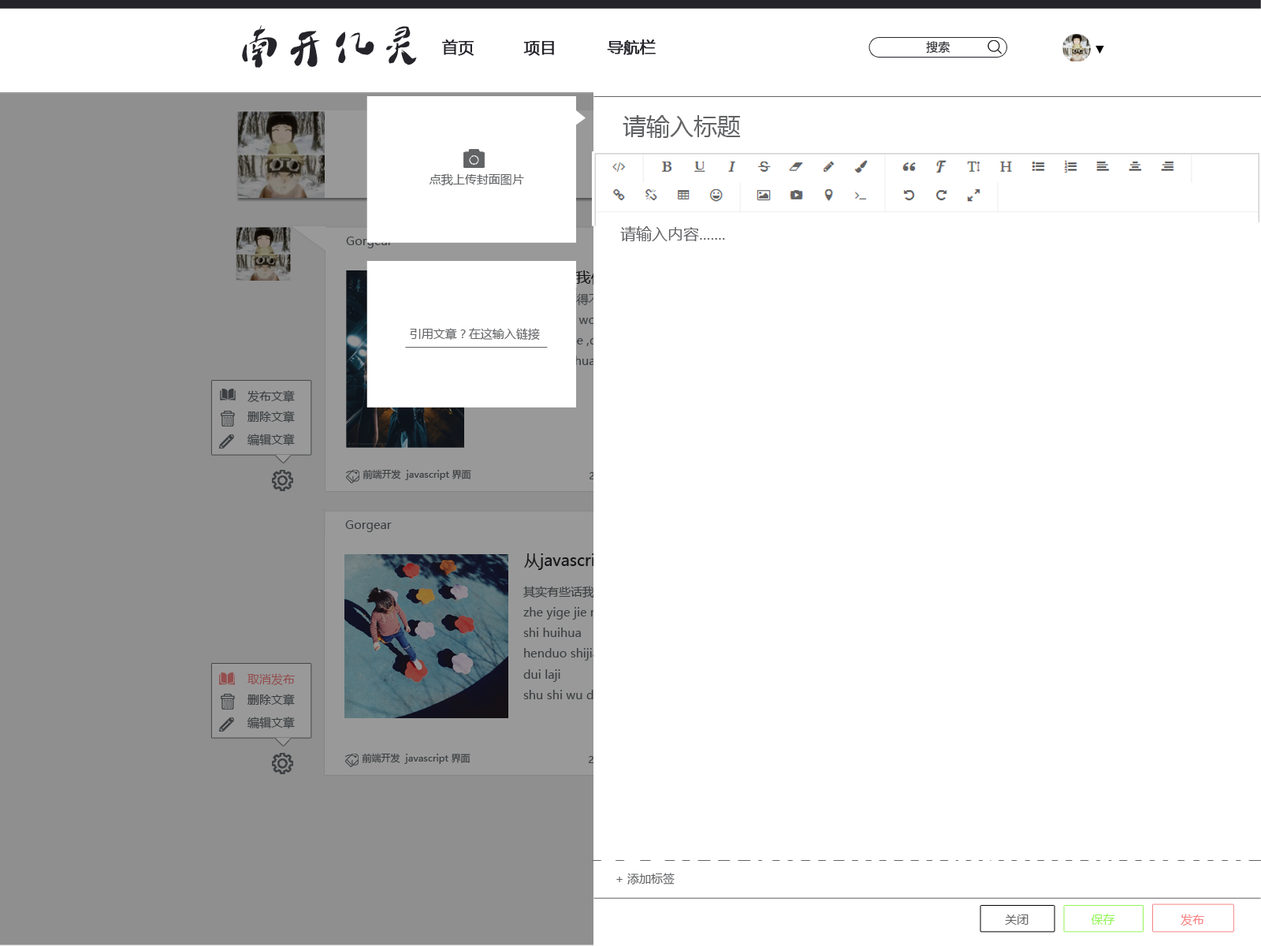
<style>
.page{position:relative;width:1261px;height:946px;background:#ffffff}
.page>*{position:absolute;margin:0}
.t1{font:47.3px "DLTZkDLF";color:#24242a}
.t2{font:15.8px "MicrosoftYaHei";color:#24242a;font-weight:bold}
.t3{font:11.8px "MicrosoftYaHei";color:#24242a}
.t4{font:11.8px "MicrosoftYaHei";color:#000000}
.t5{font:23.6px "MicrosoftYaHei";color:#626365}
.t6{font:11.8px "MicrosoftYaHei";color:#626365}
.t7{font:15.8px "MicrosoftYaHei";color:#626365}
.t8{font:11.8px "MicrosoftYaHei";color:#3b3f41}
.t9{font:9.5px "MicrosoftYaHei";color:#3b3f41}
.t10{font:11.8px "MicrosoftYaHei";color:#93f458}
.t11{font:11.8px "MicrosoftYaHei";color:#f68383}
</style>
<div class="page">
<p class="t1" style="left:242px;top:25px;width:175px;height:43px">南开亿灵</p>
<p class="t2" style="left:442px;top:39px;width:32px;height:17px">首页</p>
<p class="t2" style="left:523px;top:41px;width:31px;height:15px">项目</p>
<p class="t2" style="left:607px;top:39px;width:49px;height:16px">导航栏</p>
<p class="t3" style="left:926px;top:41px;width:24px;height:13px">搜索</p>
<p class="t4" style="left:1095px;top:46px;width:9px;height:8px">▼</p>
<p class="t5" style="left:623px;top:115px;width:118px;height:23px">请输入标题</p>
<p class="t6" style="left:429px;top:173px;width:95px;height:13px">点我上传封面图片</p>
<p class="t7" style="left:620px;top:226px;width:105px;height:15px">请输入内容.......</p>
<p class="t6" style="left:410px;top:328px;width:130px;height:12px">引用文章？在这输入链接</p>
<p class="t8" style="left:247px;top:390px;width:48px;height:13px">发布文章</p>
<p class="t8" style="left:247px;top:411px;width:48px;height:11px">删除文章</p>
<p class="t8" style="left:247px;top:433px;width:48px;height:13px">编辑文章</p>
<p class="t9" style="left:363px;top:469px;width:108px;height:11px">前端开发  javascript 界面</p>
<p class="t8" style="left:345px;top:520px;width:47px;height:12px">Gorgear</p>
<p class="t8" style="left:247px;top:694px;width:48px;height:11px">删除文章</p>
<p class="t8" style="left:247px;top:716px;width:48px;height:13px">编辑文章</p>
<p class="t9" style="left:362px;top:753px;width:108px;height:11px">前端开发  javascript 界面</p>
<p class="t6" style="left:616px;top:872px;width:59px;height:12px">+ 添加标签</p>
<p class="t6" style="left:1005px;top:914px;width:23px;height:10px">关闭</p>
<p class="t10" style="left:1091px;top:913px;width:24px;height:11px">保存</p>
<p class="t11" style="left:1181px;top:913px;width:23px;height:13px">发布</p>
</div>
